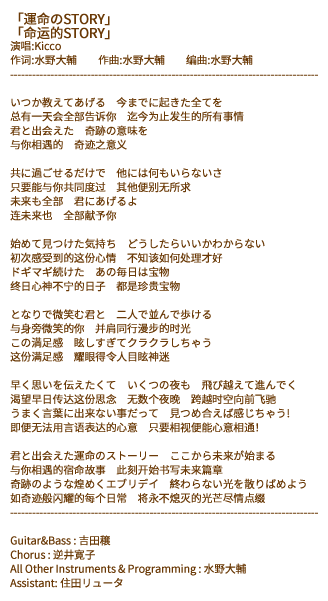
<style>
.page{position:relative;width:328px;height:601px;background:#ffffff}
.page>*{position:absolute;margin:0}
.t1{font:10.7px/14.1px "SourceHanSansSC-Regular";letter-spacing:-0.03em;color:#6a3906;font-weight:bold}
.t2{font:13.3px/14.1px "SourceHanSansSC-Regular";letter-spacing:-0.03em;color:#6a3906;font-weight:bold}
</style>
<div class="page">
<p class="t1" style="left:10px;top:12px;width:308px;height:576px"><span class="t2">「運命のSTORY」<br>「命运的STORY」<br></span>演唱:Kicco<br>作词:水野大輔　　作曲:水野大輔　　编曲:水野大輔<br>------------------------------------------------------------------------------------<br><br>いつか教えてあげる　今までに起きた全てを<br>总有一天会全部告诉你　迄今为止发生的所有事情<br>君と出会えた　奇跡の意味を<br>与你相遇的　奇迹之意义<br><br>共に過ごせるだけで　他には何もいらないさ<br>只要能与你共同度过　其他便别无所求<br>未来も全部　君にあげるよ<br>连未来也　全部献予你<br><br>始めて見つけた気持ち　どうしたらいいかわからない<br>初次感受到的这份心情　不知该如何处理才好<br>ドギマギ続けた　あの毎日は宝物<br>终日心神不宁的日子　都是珍贵宝物<br><br>となりで微笑む君と　二人で並んで歩ける<br>与身旁微笑的你　并肩同行漫步的时光<br>この満足感　眩しすぎてクラクラしちゃう<br>这份满足感　耀眼得令人目眩神迷<br><br>早く思いを伝えたくて　いくつの夜も　飛び越えて進んでく<br>渴望早日传达这份思念　无数个夜晚　跨越时空向前飞驰<br>うまく言葉に出来ない事だって　見つめ合えば感じちゃう!<br>即便无法用言语表达的心意　只要相视便能心意相通！<br><br>君と出会えた運命のストーリー　ここから未来が始まる<br>与你相遇的宿命故事　此刻开始书写未来篇章<br>奇跡のような煌めくエブリデイ　終わらない光を散りばめよう<br>如奇迹般闪耀的每个日常　将永不熄灭的光芒尽情点缀<br>------------------------------------------------------------------------------------<br><br>Guitar&amp;Bass : 吉田穣<br>Chorus : 逆井寛子<br>All Other Instruments &amp; Programming : 水野大輔<br>Assistant: 住田リュータ</p>
</div>
